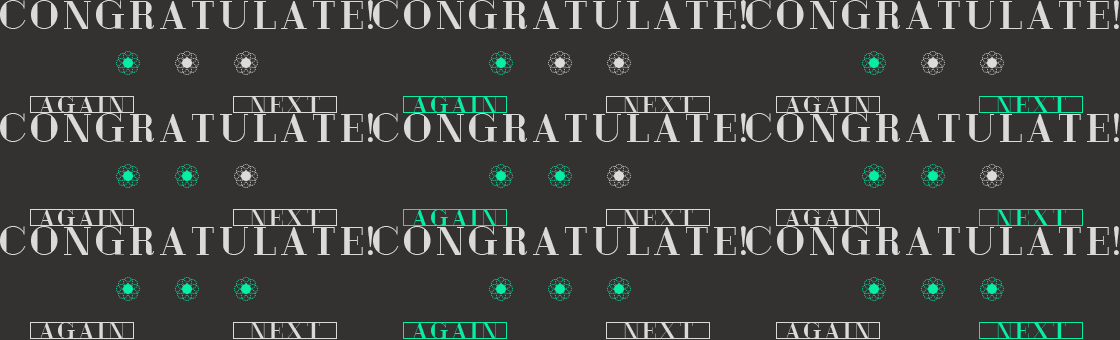
<style>
.page{position:relative;width:1120px;height:340px;background:#343131}
.page>*{position:absolute;margin:0}
.t1{font:40px "LondonFill";letter-spacing:0.1em;color:#dadada}
.t2{font:24px "LondonFill";letter-spacing:0.1em;color:#dadada}
.t3{font:24px "LondonFill";letter-spacing:0.1em;color:#07eda6}
</style>
<div class="page">
<p class="t1" style="left:0px;top:0px;width:373px;height:29px">CONGRATULATE!</p>
<p class="t1" style="left:373px;top:0px;width:373px;height:29px">CONGRATULATE!</p>
<p class="t1" style="left:746px;top:0px;width:373px;height:29px">CONGRATULATE!</p>
<p class="t2" style="left:39px;top:96px;width:86px;height:17px">AGAIN</p>
<p class="t2" style="left:250px;top:96px;width:70px;height:17px">NEXT</p>
<p class="t3" style="left:412px;top:96px;width:86px;height:17px">AGAIN</p>
<p class="t2" style="left:623px;top:96px;width:70px;height:17px">NEXT</p>
<p class="t2" style="left:785px;top:96px;width:86px;height:17px">AGAIN</p>
<p class="t3" style="left:996px;top:96px;width:70px;height:17px">NEXT</p>
<p class="t1" style="left:0px;top:113px;width:373px;height:29px">CONGRATULATE!</p>
<p class="t1" style="left:373px;top:113px;width:373px;height:29px">CONGRATULATE!</p>
<p class="t1" style="left:746px;top:113px;width:373px;height:29px">CONGRATULATE!</p>
<p class="t2" style="left:39px;top:209px;width:86px;height:17px">AGAIN</p>
<p class="t2" style="left:250px;top:209px;width:70px;height:17px">NEXT</p>
<p class="t3" style="left:412px;top:209px;width:86px;height:17px">AGAIN</p>
<p class="t2" style="left:623px;top:209px;width:70px;height:17px">NEXT</p>
<p class="t2" style="left:785px;top:209px;width:86px;height:17px">AGAIN</p>
<p class="t3" style="left:996px;top:209px;width:70px;height:17px">NEXT</p>
<p class="t1" style="left:0px;top:226px;width:373px;height:29px">CONGRATULATE!</p>
<p class="t1" style="left:373px;top:226px;width:373px;height:29px">CONGRATULATE!</p>
<p class="t1" style="left:746px;top:226px;width:373px;height:29px">CONGRATULATE!</p>
<p class="t2" style="left:39px;top:322px;width:86px;height:17px">AGAIN</p>
<p class="t2" style="left:250px;top:322px;width:70px;height:17px">NEXT</p>
<p class="t3" style="left:412px;top:322px;width:86px;height:17px">AGAIN</p>
<p class="t2" style="left:623px;top:322px;width:70px;height:17px">NEXT</p>
<p class="t2" style="left:785px;top:322px;width:86px;height:17px">AGAIN</p>
<p class="t3" style="left:996px;top:322px;width:70px;height:17px">NEXT</p>
</div>
